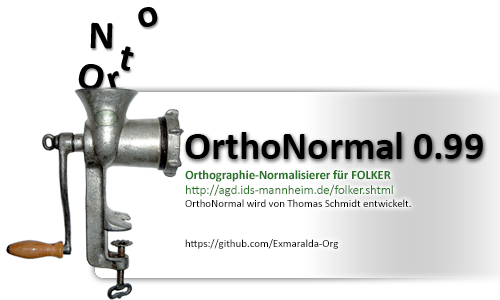
<style>
.page{position:relative;width:500px;height:300px;background:#ffffff}
.page>*{position:absolute;margin:0}
.t1{font:40px "Calibri-Bold";letter-spacing:-0.005em;color:#000000}
.t2{font:11px "Calibri";letter-spacing:-0.005em;color:#000000}
.t3{font:12.7px "Calibri-Bold";letter-spacing:-0.005em;color:#277327}
.t4{font:12.7px "Calibri";letter-spacing:-0.005em;color:#277327}
</style>
<div class="page">
<p class="t1" style="left:138px;top:7px;width:20px;height:20px;rotate:-16deg">o</p>
<p class="t1" style="left:90px;top:22px;width:23px;height:27px;rotate:1deg">N</p>
<p class="t1" style="left:121px;top:46px;width:13px;height:25px;rotate:14deg">t</p>
<p class="t1" style="left:78px;top:64px;width:26px;height:27px;rotate:14deg">O</p>
<p class="t1" style="left:107px;top:71px;width:12px;height:21px;rotate:-16deg">r</p>
<p class="t1" style="left:185px;top:132px;width:298px;height:27px">OrthoNormal 0.99</p>
<p class="t2" style="left:185px;top:170px;width:226px;height:79px"><span class="t3">Orthographie-Normalisierer für FOLKER<br></span><span class="t4">http://agd.ids-mannheim.de/folker.shtml<br></span>OrthoNormal wird von Thomas Schmidt entwickelt. <br><br><br>https://github.com/Exmaralda-Org</p>
</div>
